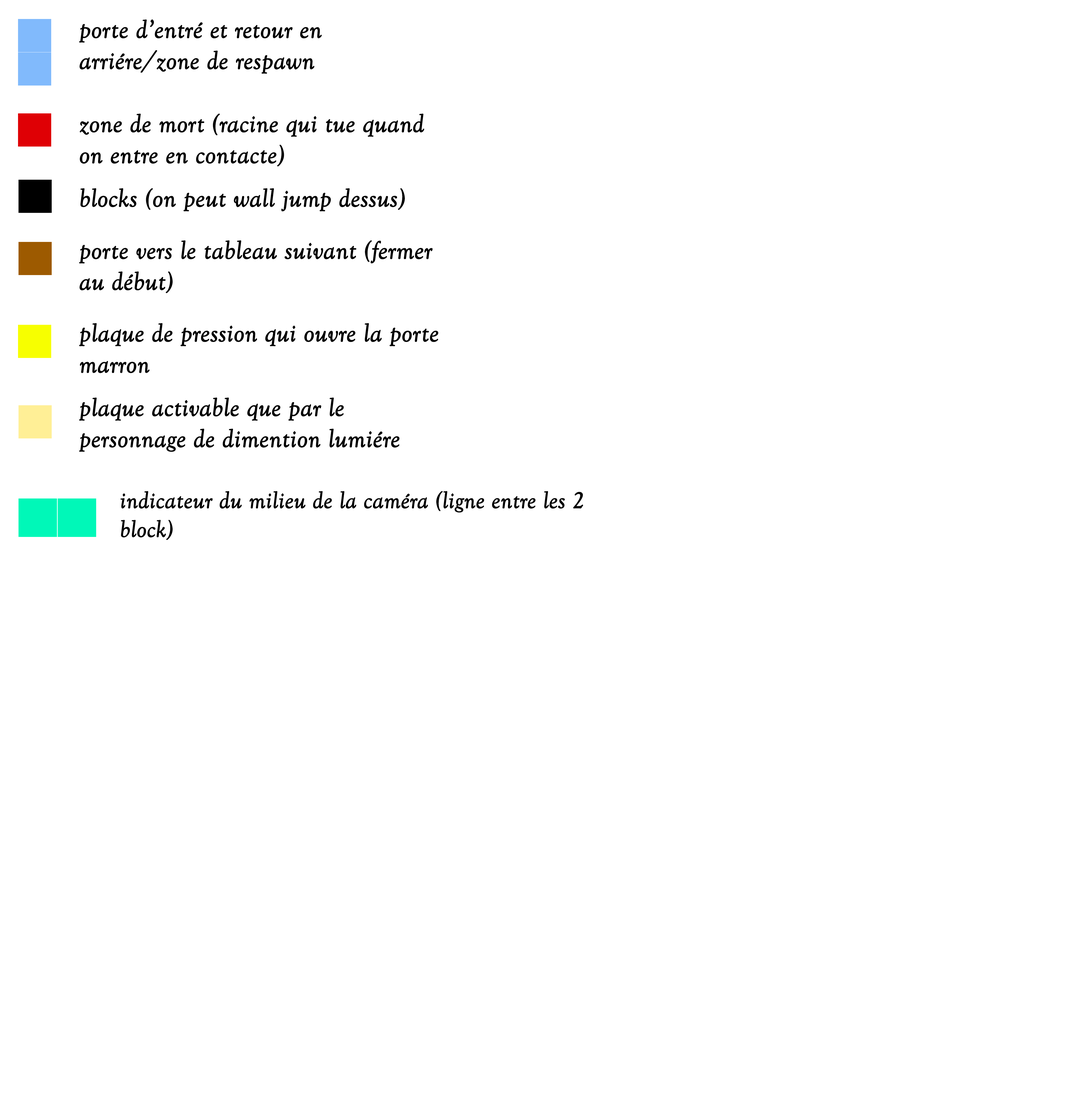
<style>
.page{position:relative;width:1077px;height:1107px;background:#ffffff}
.page>*{position:absolute;margin:0}
.t1{font:25.9px "GoudyOldStyleT-Italic";color:#000000;font-weight:bold}
.t2{font:24px "GoudyOldStyleT-Italic";color:#000000;font-weight:bold}
</style>
<div class="page">
<p class="t1" style="left:79px;top:19px;width:243px;height:55px">porte d’entré et retour en arriére/zone de respawn</p>
<p class="t1" style="left:80px;top:113px;width:344px;height:54px">zone de mort (racine qui tue quand on entre en contacte)</p>
<p class="t1" style="left:80px;top:188px;width:325px;height:23px">blocks (on peut wall jump dessus)</p>
<p class="t1" style="left:79px;top:240px;width:354px;height:53px">porte vers le tableau suivant (fermer au début)</p>
<p class="t1" style="left:79px;top:323px;width:359px;height:50px">plaque de pression qui ouvre la porte marron</p>
<p class="t1" style="left:79px;top:398px;width:320px;height:54px">plaque activable que par le personnage de dimention lumiére</p>
<p class="t2" style="left:120px;top:491px;width:463px;height:49px">indicateur du milieu de la caméra (ligne entre les 2 block)</p>
</div>
